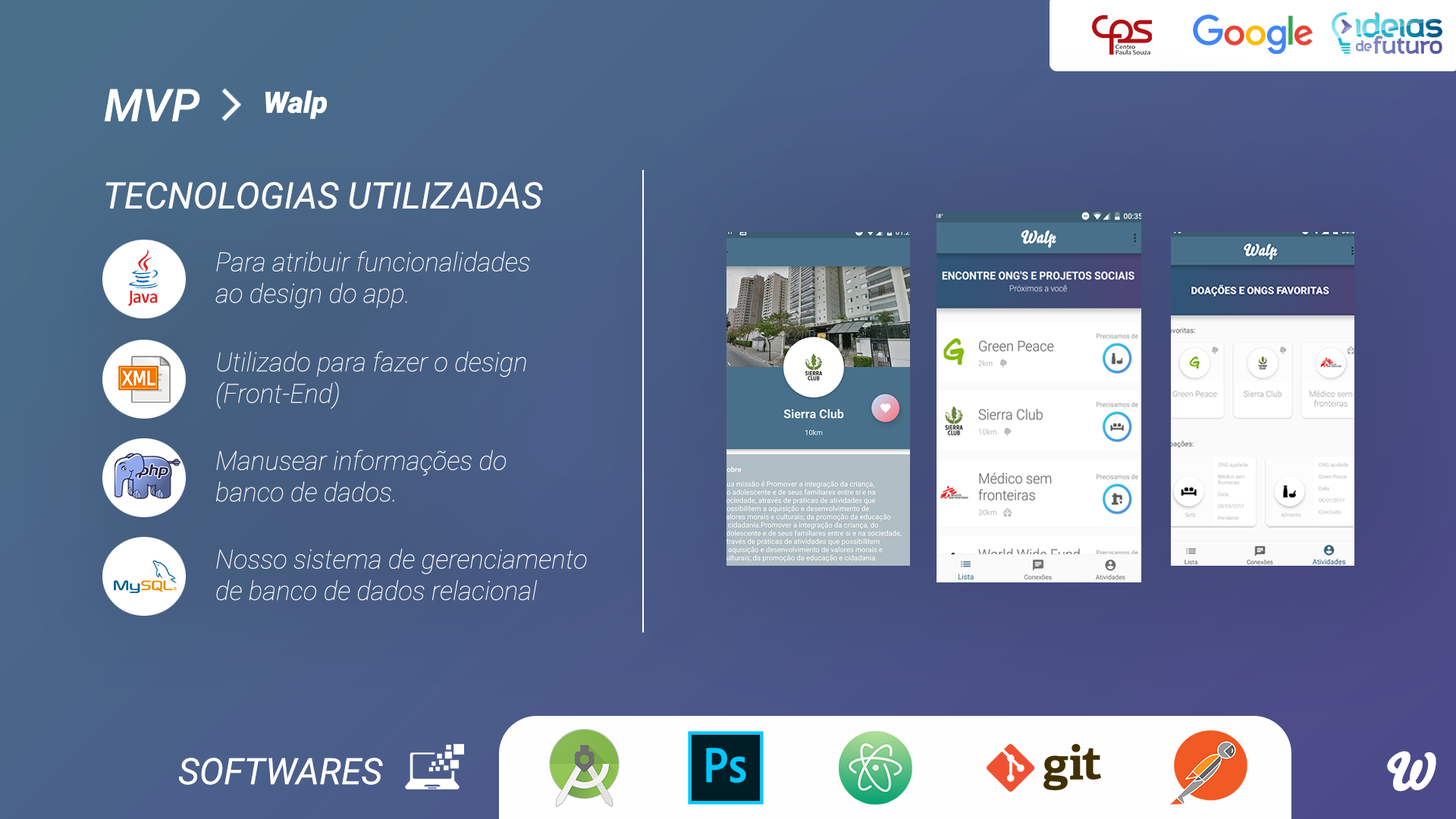
<style>
.page{position:relative;width:1456px;height:819px}
.page>*{position:absolute;margin:0}
.t1{font:45.2px "Roboto-MediumItalic";color:#ffffff}
.t2{font:29.5px "Roboto-BlackItalic";color:#ffffff}
.t3{font:36.4px "Roboto-Italic";color:#ffffff}
.t4{font:26.2px "Roboto-ThinItalic";color:#ffffff}
.t5{font:50.8px "Bello-Pro";color:#ffffff}
</style>
<div class="page">
<p class="t1" style="left:104px;top:89px;width:96px;height:32px">MVP</p>
<p class="t2" style="left:265px;top:90px;width:62px;height:29px">Walp</p>
<p class="t3" style="left:105px;top:182px;width:438px;height:27px">TECNOLOGIAS UTILIZADAS</p>
<p class="t4" style="left:215px;top:251px;width:315px;height:58px">Para atribuir funcionalidades<br>ao design do app.</p>
<p class="t4" style="left:217px;top:351px;width:309px;height:58px">Utilizado para fazer o design<br>(Front-End)</p>
<p class="t4" style="left:216px;top:450px;width:290px;height:52px">Manusear informações do<br>banco de dados.</p>
<p class="t4" style="left:216px;top:548px;width:371px;height:53px">Nosso sistema de gerenciamento <br>de banco de dados relacional</p>
<p class="t3" style="left:179px;top:758px;width:204px;height:27px">SOFTWARES</p>
<p class="t5" style="left:1387px;top:751px;width:49px;height:41px">W</p>
</div>
